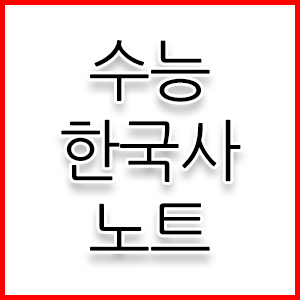
<style>
.page{position:relative;width:300px;height:300px;background:#ffffff}
.page>*{position:absolute;margin:0}
.t1{font:66.7px "NanumGothic";letter-spacing:-0.03em;color:#000000}
</style>
<div class="page">
<p class="t1" style="left:61px;top:40px;width:180px;height:211px;text-align:center">수능<br>한국사<br>노트</p>
</div>
